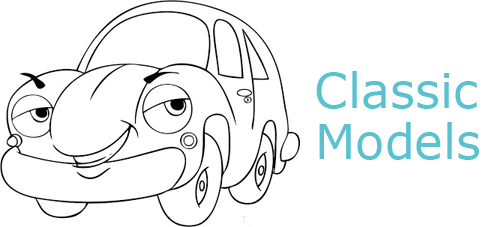
<style>
.page{position:relative;width:500px;height:227px;background:#ffffff}
.page>*{position:absolute;margin:0}
.t1{font:48px "Verdana";color:#5ac1d0}
</style>
<div class="page">
<p class="t1" style="left:316px;top:71px;width:161px;height:38px">Classic</p>
<p class="t1" style="left:319px;top:122px;width:160px;height:38px">Models</p>
</div>
